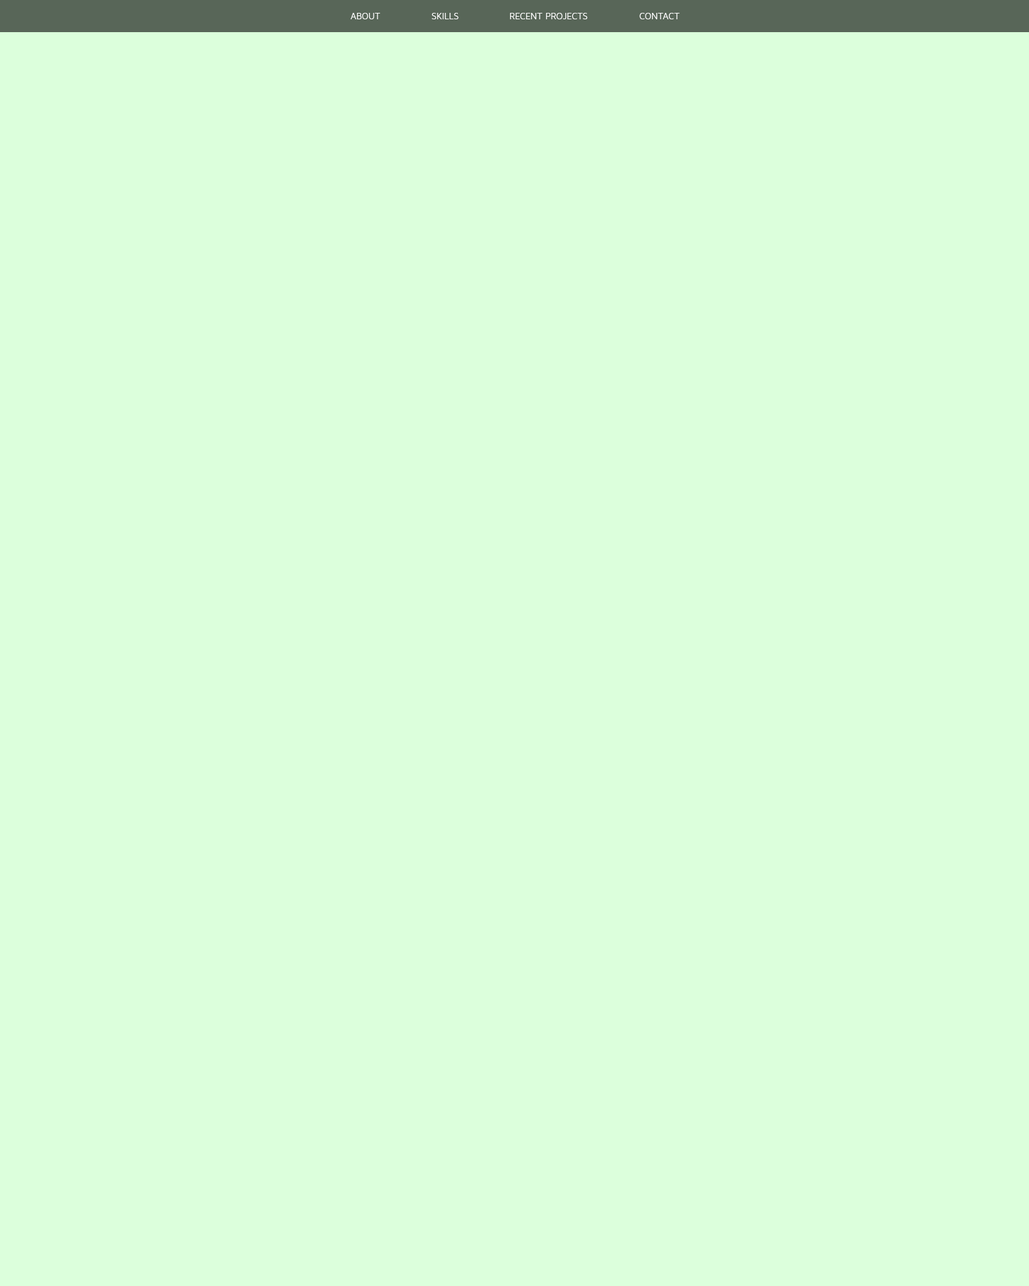
<style>
.page{position:relative;width:1029px;height:1286px;background:#dcffdc}
.page>*{position:absolute;margin:0}
.t1{font:9px "MavenProRegular";color:#ffffff}
</style>
<div class="page">
<p class="t1" style="left:350px;top:13px;width:30px;height:6px">ABOUT</p>
<p class="t1" style="left:431px;top:13px;width:27px;height:6px">SKILLS</p>
<p class="t1" style="left:510px;top:13px;width:78px;height:6px">RECENT PROJECTS</p>
<p class="t1" style="left:639px;top:13px;width:41px;height:6px">CONTACT</p>
</div>
